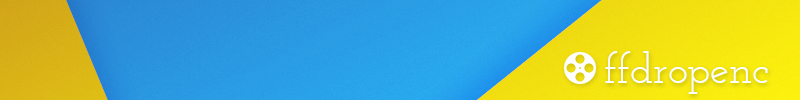
<style>
.page{position:relative;width:800px;height:100px}
.page>*{position:absolute;margin:0}
.t1{font:42.5px "JosefinSlab";color:#ffffff}
</style>
<div class="page">
<p class="t1" style="left:605px;top:51px;width:163px;height:43px">ffdropenc</p>
</div>
